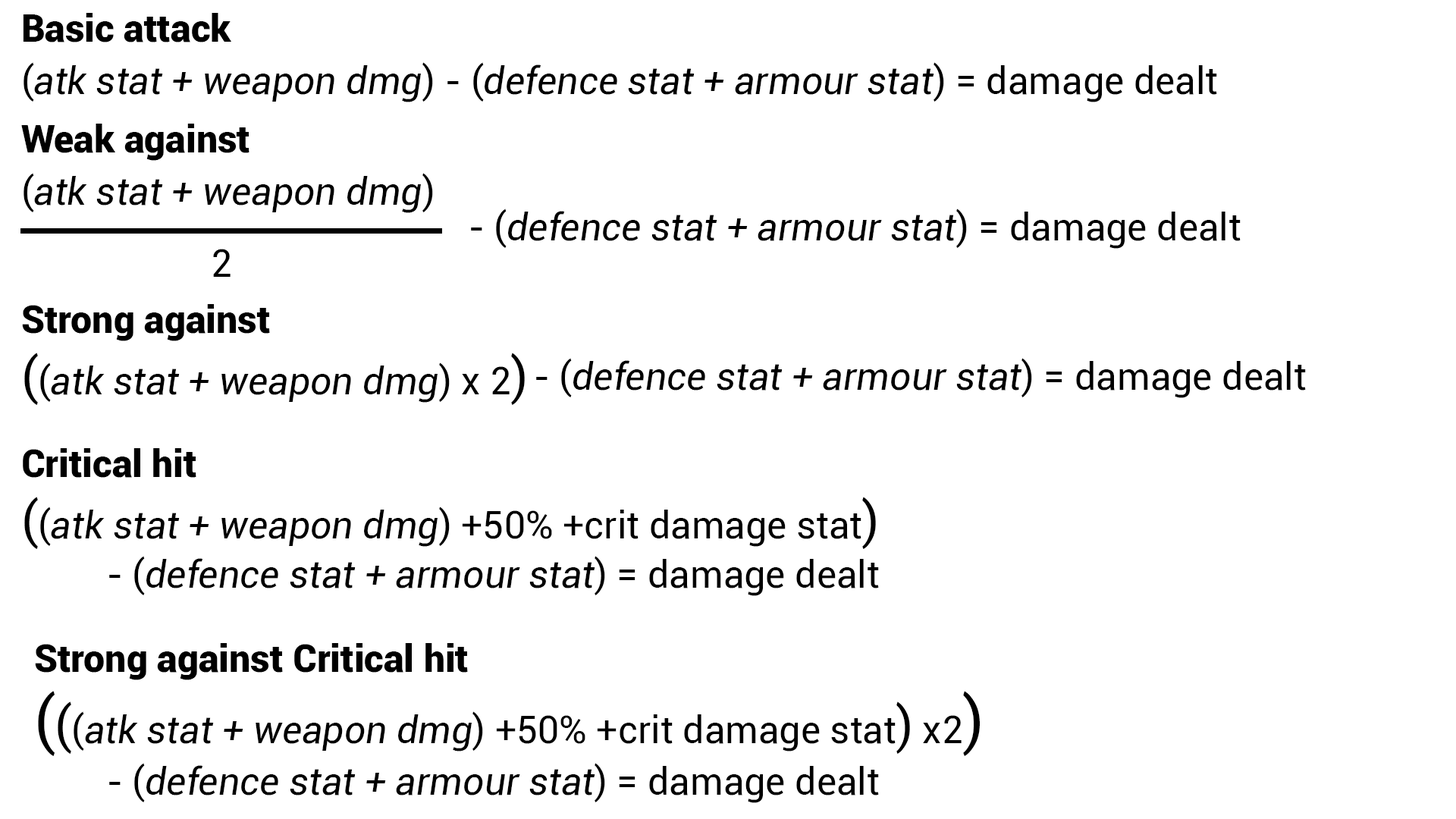
<style>
.page{position:relative;width:1456px;height:819px;background:#ffffff}
.page>*{position:absolute;margin:0}
.t1{font:9.1px "Roboto-Black";color:#000000}
.t2{font:37.9px "Roboto-Italic";color:#000000}
.t3{font:37.9px "Roboto-Regular";color:#000000}
.t4{font:9.1px "Roboto-Regular";color:#000000}
.t5{font:50.6px "Roboto-Regular";color:#000000}
.t6{font:63.2px "Roboto-Regular";color:#000000}
</style>
<div class="page">
<p class="t1" style="left:23px;top:13px;width:208px;height:29px">Basic attack</p>
<p class="t2" style="left:24px;top:62px;width:1193px;height:40px"><span class="t3">(</span>atk stat + weapon dmg<span class="t3">) - (</span>defence stat + armour stat<span class="t3">) = damage dealt</span></p>
<p class="t1" style="left:21px;top:124px;width:228px;height:37px">Weak against</p>
<p class="t2" style="left:24px;top:173px;width:409px;height:40px"><span class="t3">(</span>atk stat + weapon dmg<span class="t3">)</span></p>
<p class="t2" style="left:471px;top:209px;width:770px;height:40px"><span class="t3">- (</span>defence stat + armour stat<span class="t3">) = damage dealt</span></p>
<p class="t4" style="left:213px;top:249px;width:18px;height:28px">2</p>
<p class="t1" style="left:22px;top:304px;width:248px;height:37px">Strong against</p>
<p class="t2" style="left:24px;top:353px;width:501px;height:52px"><span class="t5">(</span><span class="t3">(</span>atk stat + weapon dmg<span class="t3">) x 2</span><span class="t5">)</span></p>
<p class="t2" style="left:536px;top:358px;width:770px;height:40px"><span class="t3">- (</span>defence stat + armour stat<span class="t3">) = damage dealt</span></p>
<p class="t1" style="left:23px;top:448px;width:173px;height:30px">Critical hit</p>
<p class="t3" style="left:24px;top:497px;width:852px;height:52px"><span class="t5">(</span>(<span class="t2">atk stat + weapon dmg</span>) +50% +crit damage stat<span class="t5">)</span></p>
<p class="t2" style="left:109px;top:556px;width:770px;height:40px"><span class="t3">- (</span>defence stat + armour stat<span class="t3">) = damage dealt</span></p>
<p class="t1" style="left:35px;top:643px;width:433px;height:37px">Strong against Critical hit</p>
<p class="t3" style="left:38px;top:691px;width:942px;height:65px"><span class="t6">(</span><span class="t5">(</span>(<span class="t2">atk stat + weapon dmg</span>) +50% +crit damage stat<span class="t5">)</span> x2<span class="t6">)</span></p>
<p class="t2" style="left:109px;top:763px;width:770px;height:40px"><span class="t3">- (</span>defence stat + armour stat<span class="t3">) = damage dealt</span></p>
</div>
